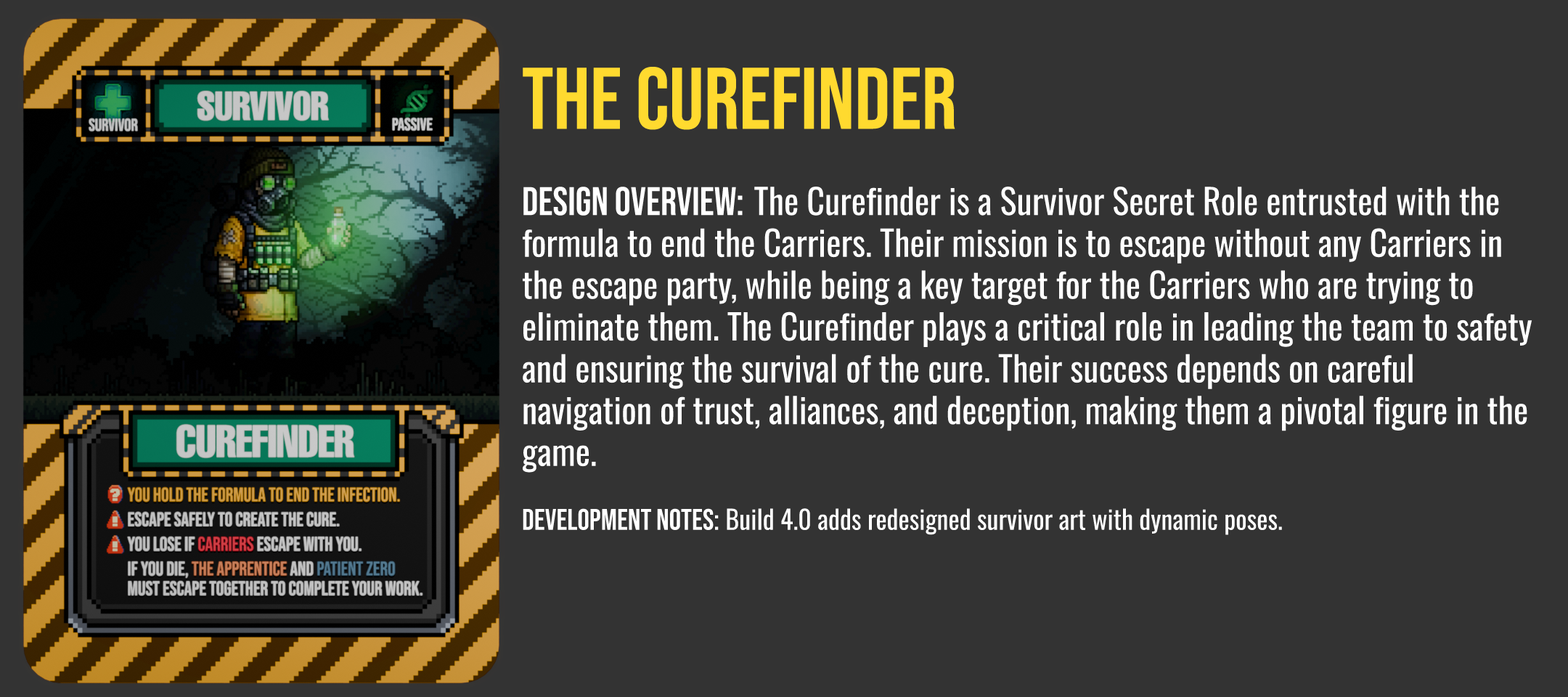
<style>
.page{position:relative;width:1568px;height:697px;background:#333333}
.page>*{position:absolute;margin:0}
.t1{font:87.1px "BebasNeue-Regular";color:#ffda2f}
.t2{font:34.8px "Oswald-Regular";color:#ffffff}
.t3{font:39.9px "BebasNeue-Regular";color:#ffffff}
.t4{font:26.1px "Oswald-Regular";color:#ffffff}
.t5{font:29.8px "BebasNeue-Regular";color:#ffffff}
</style>
<div class="page">
<p class="t1" style="left:523px;top:67px;width:432px;height:63px">THE CUREFINDER</p>
<p class="t2" style="left:523px;top:187px;width:1009px;height:286px"><span class="t3">Design Overview: </span>The Curefinder is a Survivor Secret Role entrusted with the formula to end the Carriers. Their mission is to escape without any Carriers in the escape party, while being a key target for the Carriers who are trying to eliminate them. The Curefinder plays a critical role in leading the team to safety and ensuring the survival of the cure. Their success depends on careful navigation of trust, alliances, and deception, making them a pivotal figure in the game.</p>
<p class="t4" style="left:523px;top:508px;width:759px;height:27px"><span class="t5">development Notes:</span> Build 4.0 adds redesigned survivor art with dynamic poses.</p>
</div>
